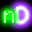
<style>
.page{position:relative;width:32px;height:32px}
.page>*{position:absolute;margin:0}
.t1{font:16px "bobsgame"}
</style>
<div class="page">
<p class="t1" style="left:4px;top:11px;width:10px;height:12px">n</p>
<p class="t1" style="left:16px;top:7px;width:12px;height:16px">D</p>
</div>
